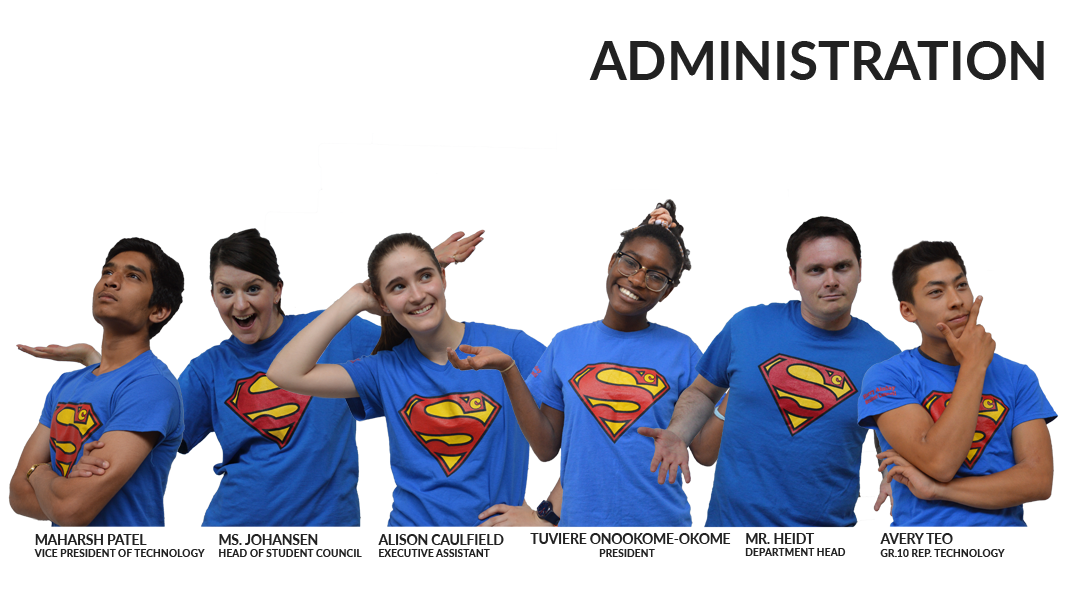
<style>
.page{position:relative;width:1080px;height:600px;background:#ffffff}
.page>*{position:absolute;margin:0}
.t1{font:53px "Lato-Bold";color:#222222}
.t2{font:10.4px "Lato-Bold";color:#222222}
.t3{font:13.7px "Lato-Bold";color:#222222}
</style>
<div class="page">
<p class="t1" style="left:589px;top:41px;width:455px;height:39px">ADMINISTRATION</p>
<p class="t2" style="left:34px;top:534px;width:171px;height:23px"><span class="t3">MAHARSH PATEL<br></span>VICE PRESIDENT OF TECHNOLOGY</p>
<p class="t2" style="left:219px;top:534px;width:143px;height:23px"><span class="t3">MS. JOHANSEN<br></span>HEAD OF STUDENT COUNCIL</p>
<p class="t2" style="left:378px;top:534px;width:126px;height:23px"><span class="t3">ALISON CAULFIELD<br></span>EXECUTIVE ASSISTANT</p>
<p class="t3" style="left:530px;top:533px;width:201px;height:24px">TUVIERE ONOOKOME-OKOME<br>                 <span class="t2">PRESIDENT</span></p>
<p class="t2" style="left:745px;top:533px;width:101px;height:23px"><span class="t3">MR. HEIDT<br></span>DEPARTMENT HEAD</p>
<p class="t2" style="left:880px;top:533px;width:125px;height:24px"><span class="t3">AVERY TEO<br></span>GR.10 REP. TECHNOLOGY</p>
</div>
